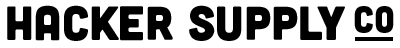
<style>
.page{position:relative;width:400px;height:48px;background:#ffffff}
.page>*{position:absolute;margin:0}
.t1{font:48px "Cubano-Regular";color:#000000}
.t2{font:36px "Cubano-Regular";letter-spacing:0.025em;color:#000000}
</style>
<div class="page">
<p class="t1" style="left:7px;top:5px;width:338px;height:36px">Hacker Supply</p>
<p class="t2" style="left:354px;top:6px;width:40px;height:27px">co</p>
</div>
